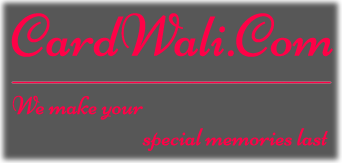
<style>
.page{position:relative;width:343px;height:163px;background:#575757}
.page>*{position:absolute;margin:0}
.t1{font:60px "Niconne-Regular";color:#ff0147}
.t2{font:26px "Niconne-Regular";color:#ff0147}
</style>
<div class="page">
<p class="t1" style="left:11px;top:13px;width:322px;height:44px">CardWali.Com</p>
<p class="t2" style="left:12px;top:95px;width:316px;height:56px">We make your <br>                     special memories last</p>
</div>
